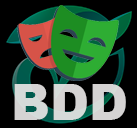
<style>
.page{position:relative;width:137px;height:128px;background:#000000}
.page>*{position:absolute;margin:0}
.t1{font:50px "Arial-Black";color:#d5d3d3}
</style>
<div class="page">
<p class="t1" style="left:14px;top:84px;width:112px;height:36px">BDD</p>
</div>
